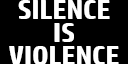
<style>
.page{position:relative;width:128px;height:64px;background:#000000}
.page>*{position:absolute;margin:0}
.t1{font:27.3px "HPSimplified-Bold";letter-spacing:-0.01em;color:#ffffff}
</style>
<div class="page">
<p class="t1" style="left:18px;top:0px;width:92px;height:19px">SILENCE</p>
<p class="t1" style="left:54px;top:23px;width:20px;height:19px">IS</p>
<p class="t1" style="left:9px;top:46px;width:110px;height:19px">VIOLENCE</p>
</div>
